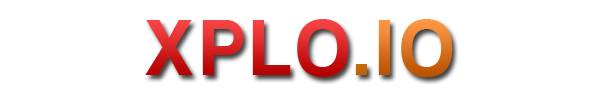
<style>
.page{position:relative;width:600px;height:100px;background:#ffffff}
.page>*{position:absolute;margin:0}
.t1{font:80px "CoolveticaRg-Regular";letter-spacing:0.1em}
</style>
<div class="page">
<p class="t1" style="left:145px;top:19px;width:308px;height:58px">XPLO.IO</p>
</div>
